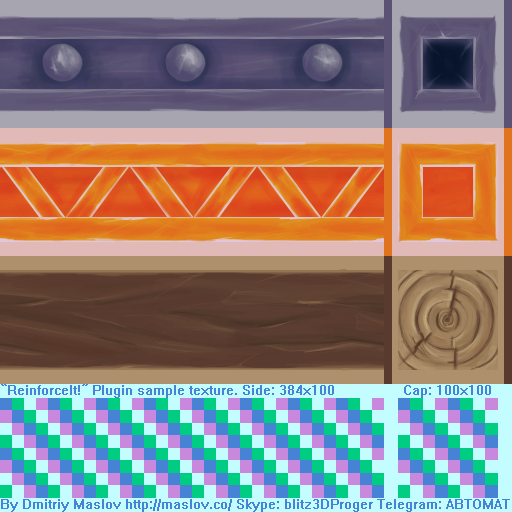
<style>
.page{position:relative;width:512px;height:512px}
.page>*{position:absolute;margin:0}
.t1{font:12px "System";color:#4783d4}
</style>
<div class="page">
<p class="t1" style="left:1px;top:384px;width:490px;height:14px">“ReinforceIt!” Plugin sample texture. Side: 384x100                 Cap: 100x100</p>
<p class="t1" style="left:1px;top:499px;width:509px;height:13px">By Dmitriy Maslov http://maslov.co/ Skype: blitz3DProger Telegram: ABTOMAT</p>
</div>
